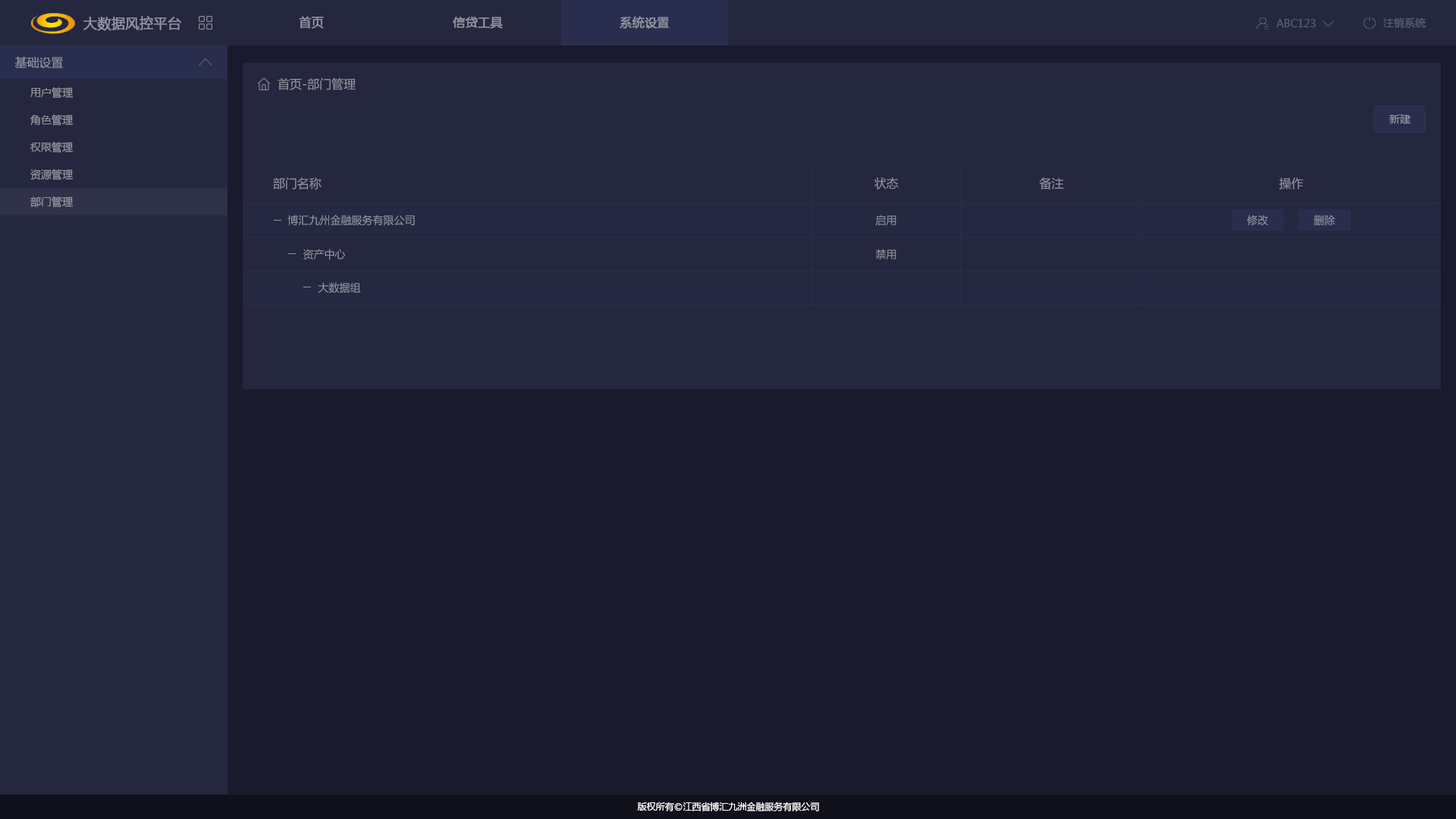
<style>
.page{position:relative;width:1456px;height:819px;background:#191a2c}
.page>*{position:absolute;margin:0}
.t1{font:13.6px "MicrosoftYaHei";color:#92939f;font-weight:bold}
.t2{font:12.1px "MicrosoftYaHei";color:#92939f;font-weight:bold}
.t3{font:10.6px "MicrosoftYaHei";color:#5c6076}
.t4{font:12.1px "MicrosoftYaHei";color:#92939f}
.t5{font:10.6px "MicrosoftYaHei";color:#92939f}
.t6{font:9.1px "MicrosoftYaHei";color:#ffffff}
</style>
<div class="page">
<p class="t1" style="left:83px;top:16px;width:98px;height:15px">大数据风控平台</p>
<p class="t2" style="left:299px;top:16px;width:25px;height:13px">首页</p>
<p class="t2" style="left:453px;top:17px;width:50px;height:12px">信贷工具</p>
<p class="t2" style="left:620px;top:16px;width:50px;height:13px">系统设置</p>
<p class="t3" style="left:1383px;top:17px;width:43px;height:11px">注销系统</p>
<p class="t3" style="left:1276px;top:19px;width:40px;height:8px">ABC123</p>
<p class="t4" style="left:14px;top:56px;width:49px;height:12px">基础设置</p>
<p class="t5" style="left:30px;top:87px;width:44px;height:12px">用户管理</p>
<p class="t4" style="left:278px;top:78px;width:78px;height:12px">首页-部门管理</p>
<p class="t5" style="left:30px;top:115px;width:44px;height:11px">角色管理</p>
<p class="t5" style="left:1389px;top:115px;width:21px;height:9px">新建</p>
<p class="t5" style="left:30px;top:142px;width:44px;height:11px">权限管理</p>
<p class="t5" style="left:30px;top:169px;width:44px;height:11px">资源管理</p>
<p class="t4" style="left:273px;top:177px;width:49px;height:13px">部门名称</p>
<p class="t4" style="left:874px;top:177px;width:25px;height:13px">状态</p>
<p class="t4" style="left:1039px;top:177px;width:25px;height:13px">备注</p>
<p class="t4" style="left:1279px;top:177px;width:25px;height:13px">操作</p>
<p class="t5" style="left:30px;top:196px;width:44px;height:12px">部门管理</p>
<p class="t5" style="left:287px;top:215px;width:128px;height:11px">博汇九州金融服务有限公司</p>
<p class="t5" style="left:875px;top:215px;width:21px;height:11px">启用</p>
<p class="t5" style="left:1247px;top:215px;width:22px;height:11px">修改</p>
<p class="t5" style="left:1313px;top:215px;width:22px;height:11px">删除</p>
<p class="t5" style="left:303px;top:249px;width:43px;height:11px">资产中心</p>
<p class="t5" style="left:875px;top:249px;width:21px;height:10px">禁用</p>
<p class="t5" style="left:318px;top:282px;width:43px;height:11px">大数据组</p>
<p class="t6" style="left:637px;top:802px;width:182px;height:9px">版权所有©江西省博汇九洲金融服务有限公司</p>
</div>
